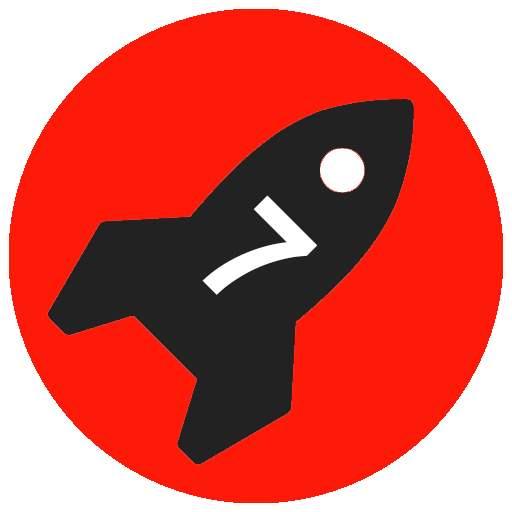
<style>
.page{position:relative;width:512px;height:512px;background:#fe1a09}
.page>*{position:absolute;margin:0}
.t1{font:150px "Arial-BoldMT";color:#ffffff}
</style>
<div class="page">
<p class="t1" style="left:202px;top:195px;width:116px;height:100px;rotate:45deg">7</p>
</div>
